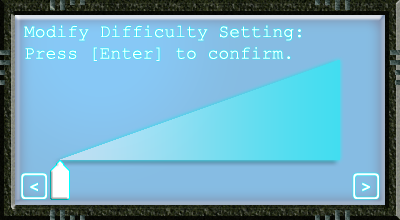
<style>
.page{position:relative;width:400px;height:220px}
.page>*{position:absolute;margin:0}
.t1{font:18px "CourierNewPSMT";color:#ffffff}
.t2{font:22px "SegoeKeycaps";color:#ffffff}
</style>
<div class="page">
<p class="t1" style="left:24px;top:25px;width:277px;height:36px">Modify Difficulty Setting:<br>Press [Enter] to confirm.</p>
<p class="t2" style="left:21px;top:173px;width:26px;height:26px">&lt;</p>
<p class="t2" style="left:353px;top:173px;width:26px;height:26px">&gt;</p>
</div>
